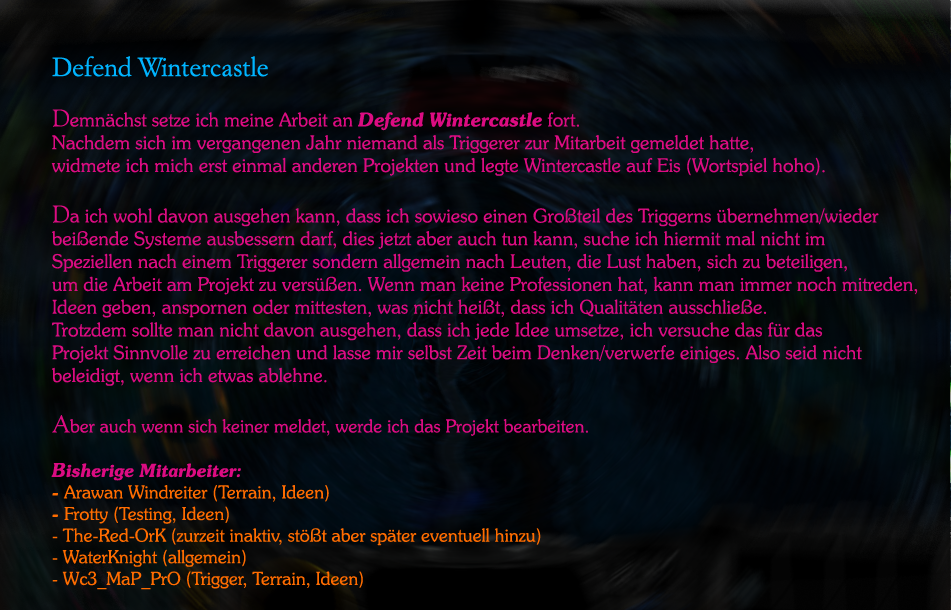
<style>
.page{position:relative;width:951px;height:610px}
.page>*{position:absolute;margin:0}
.t1{font:19px "SouvenirITCbyBT-Light";color:#dc0c82}
.t2{font:26px "ItalianGaramondBT-Roman";color:#00b4ff}
.t3{font:24px "GoudyOldStyleBT-Roman";color:#dc0c82}
.t4{font:19px "SouvenirITCbyBT-DemiItalic";color:#dc0c82}
.t5{font:18px "SouvenirITCbyBT-Light";color:#dc0c82}
.t6{font:18px "SouvenirITCbyBT-DemiItalic";color:#dc0c82}
.t7{font:18px "SouvenirITCbyBT-DemiItalic";color:#ff6c00}
.t8{font:18px "SouvenirITCbyBT-Light";color:#ff6c00}
</style>
<div class="page">
<p class="t1" style="left:51px;top:56px;width:867px;height:534px"><span class="t2">Defend Wintercastle<br><br></span><span class="t3">D</span>emnächst setze ich meine Arbeit an <span class="t4">Defend Wintercastle</span> fort.<br>Nachdem sich im vergangenen Jahr niemand als Triggerer zur Mitarbeit gemeldet hatte,<br>widmete ich mich erst einmal anderen Projekten und legte Wintercastle auf Eis (Wortspiel hoho).<br><br><span class="t3">D</span>a ich wohl davon ausgehen kann, dass ich sowieso einen Großteil des Triggerns übernehmen/wieder<br>beißende Systeme ausbessern darf, dies jetzt aber auch tun kann, suche ich hiermit mal nicht im<br>Speziellen nach einem Triggerer sondern allgemein nach Leuten, die Lust haben, sich zu beteiligen,<br>um die Arbeit am Projekt zu versüßen. Wenn man keine Professionen hat, kann man immer noch mitreden,<br>Ideen geben, anspornen oder mittesten, was nicht heißt, dass ich Qualitäten ausschließe.<br>Trotzdem sollte man nicht davon ausgehen, dass ich jede Idee umsetze, ich versuche das für das<br>Projekt Sinnvolle zu erreichen und lasse mir selbst Zeit beim Denken/verwerfe einiges. Also seid nicht<br>beleidigt, wenn ich etwas ablehne.<br><br><span class="t3">A</span><span class="t5">ber auch wenn sich keiner meldet, werde ich das Projekt bearbeiten.<br><br></span><span class="t4">B</span><span class="t6">isherige Mitarbeiter:<br></span><span class="t7">- </span><span class="t8">Arawan Windreiter (Terrain, Ideen)<br></span><span class="t7">- </span><span class="t8">Frotty (Testing, Ideen)<br>- The-Red-OrK (zurzeit inaktiv, stößt aber später eventuell hinzu)<br>- WaterKnight (allgemein)<br>- Wc3_MaP_PrO (Trigger, Terrain, Ideen)</span></p>
</div>
